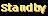
<style>
.page{position:relative;width:48px;height:16px;background:#000000}
.page>*{position:absolute;margin:0}
.t1{font:10px "Meiryo";color:#f0f080;font-weight:bold}
</style>
<div class="page">
<p class="t1" style="left:1px;top:3px;width:45px;height:10px">Standby</p>
</div>
